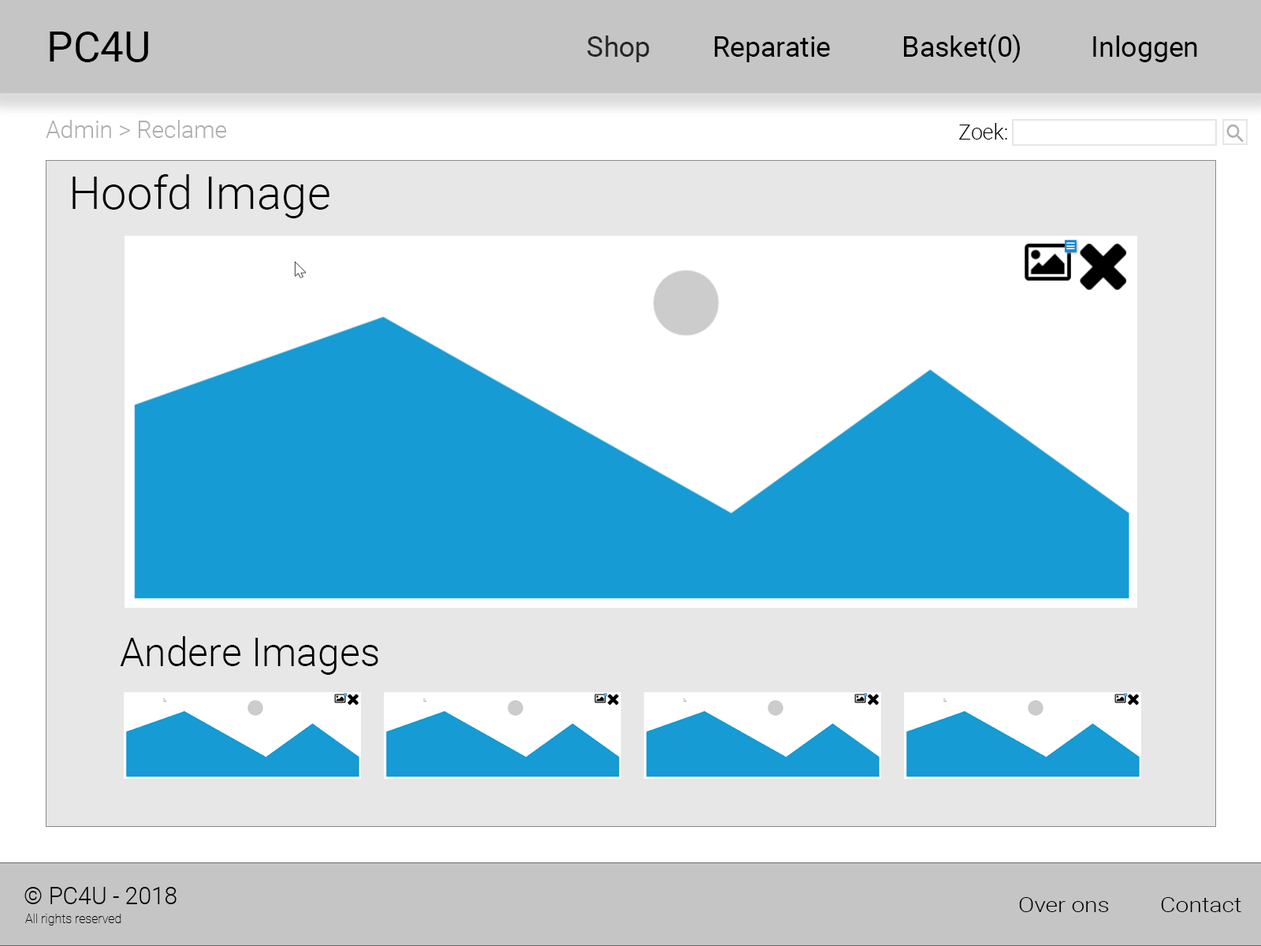
<style>
.page{position:relative;width:1261px;height:946px;background:#ffffff}
.page>*{position:absolute;margin:0}
.t1{font:42px "Roboto-Regular";color:#000000}
.t2{font:28px "Roboto-Regular";color:#000000}
.t3{font:28px "Roboto-Regular";color:#262626}
.t4{font:23.6px "Roboto-Light";color:#afafaf}
.t5{font:21px "Roboto-Light";color:#000000}
.t6{font:46px "Roboto-Light";color:#000000}
.t7{font:39.4px "Roboto-Light";color:#000000}
.t8{font:23.6px "Roboto-Light";color:#000000}
.t9{font:20.4px "Roboto-Light";color:#000000;scale:1.16 1}
.t10{font:12.6px "Roboto-Thin";color:#000000}
</style>
<div class="page">
<p class="t1" style="left:50px;top:32px;width:98px;height:30px">PC4U</p>
<p class="t2" style="left:587px;top:34px;width:610px;height:29px"><span class="t3">Shop</span>  Reparatie   Basket(0)   Inloggen</p>
<p class="t4" style="left:46px;top:120px;width:180px;height:18px">Admin &gt; Reclame</p>
<p class="t5" style="left:959px;top:123px;width:48px;height:16px">Zoek:</p>
<p class="t6" style="left:73px;top:174px;width:256px;height:44px">Hoofd Image</p>
<p class="t7" style="left:120px;top:636px;width:258px;height:39px">Andere Images</p>
<p class="t8" style="left:24px;top:887px;width:153px;height:17px">© PC4U - 2018</p>
<p class="t9" style="left:1019px;top:897px;width:222px;height:15px">Over ons  Contact</p>
<p class="t10" style="left:25px;top:913px;width:96px;height:12px">All rights reserved</p>
</div>
